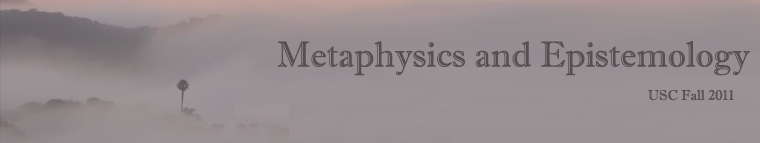
<style>
.page{position:relative;width:760px;height:143px}
.page>*{position:absolute;margin:0}
.t1{font:36px "ImprintMT-Shadow";color:#564e51}
.t2{font:14px "ImprintMT-Shadow";color:#564e51}
</style>
<div class="page">
<p class="t1" style="left:277px;top:41px;width:473px;height:35px">Metaphysics and Epistemology</p>
<p class="t2" style="left:648px;top:89px;width:86px;height:12px">USC Fall 2011</p>
</div>
